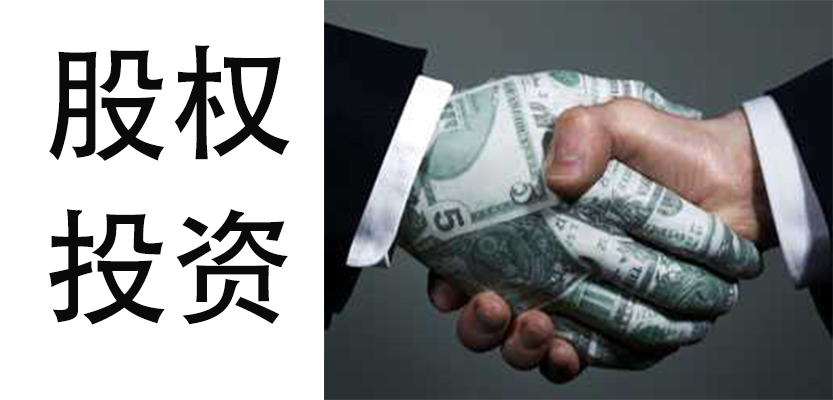
<style>
.page{position:relative;width:833px;height:400px;background:#ffffff}
.page>*{position:absolute;margin:0}
.t1{font:125px "AdobeHeitiStd-Regular";color:#0a0a0a}
</style>
<div class="page">
<p class="t1" style="left:49px;top:45px;width:241px;height:116px">股权</p>
<p class="t1" style="left:49px;top:209px;width:239px;height:116px">投资</p>
</div>
